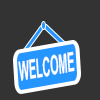
<style>
.page{position:relative;width:100px;height:100px;background:#333333}
.page>*{position:absolute;margin:0}
.t1{font:26.8px "Arial-BoldMT";color:#ffffff;scale:0.4 1}
</style>
<div class="page">
<p class="t1" style="left:18px;top:51px;width:57px;height:30px;rotate:-10deg">WELCOME</p>
</div>
